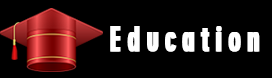
<style>
.page{position:relative;width:272px;height:78px;background:#000000}
.page>*{position:absolute;margin:0}
.t1{font:33.3px "Geometric706BT-BlackCondensedB";letter-spacing:0.2em;color:#ffffff;font-weight:bold;scale:0.79 1}
</style>
<div class="page">
<p class="t1" style="left:110px;top:26px;width:149px;height:26px">Education</p>
<p class="t1" style="left:111px;top:26px;width:149px;height:26px">Education</p>
</div>
